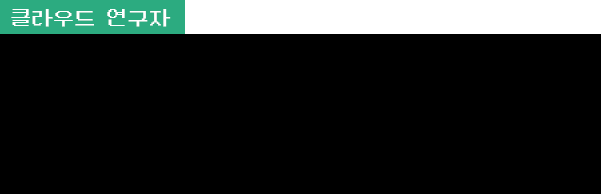
<style>
.page{position:relative;width:601px;height:194px;background:#000000}
.page>*{position:absolute;margin:0}
.t1{font:21.3px "DungGeunMo";color:#ffffff}
</style>
<div class="page">
<p class="t1" style="left:11px;top:9px;width:160px;height:18px">클라우드 연구자</p>
</div>
